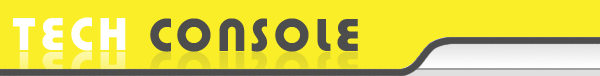
<style>
.page{position:relative;width:600px;height:76px;background:#faee28}
.page>*{position:absolute;margin:0}
.t1{font:48px "PumpDemiBoldLetPlain";letter-spacing:0.1em;color:#ffffff}
.t2{font:48px "PumpDemiBoldLetPlain";letter-spacing:0.1em;color:#4d4d4d}
</style>
<div class="page">
<p class="t1" style="left:13px;top:17px;width:113px;height:34px">TECH</p>
<p class="t2" style="left:150px;top:18px;width:208px;height:34px">CONSOLE</p>
</div>
